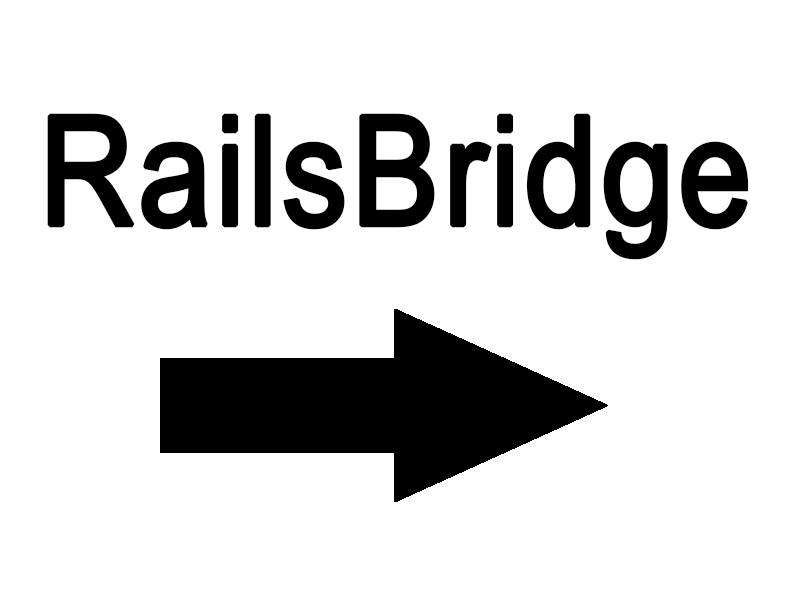
<style>
.page{position:relative;width:792px;height:612px;background:#ffffff}
.page>*{position:absolute;margin:0}
.t1{font:151.8px "ArialNarrow";color:#000000;font-weight:bold;scale:1.05 1}
</style>
<div class="page">
<p class="t1" style="left:47px;top:113px;width:702px;height:147px">RailsBridge</p>
</div>
